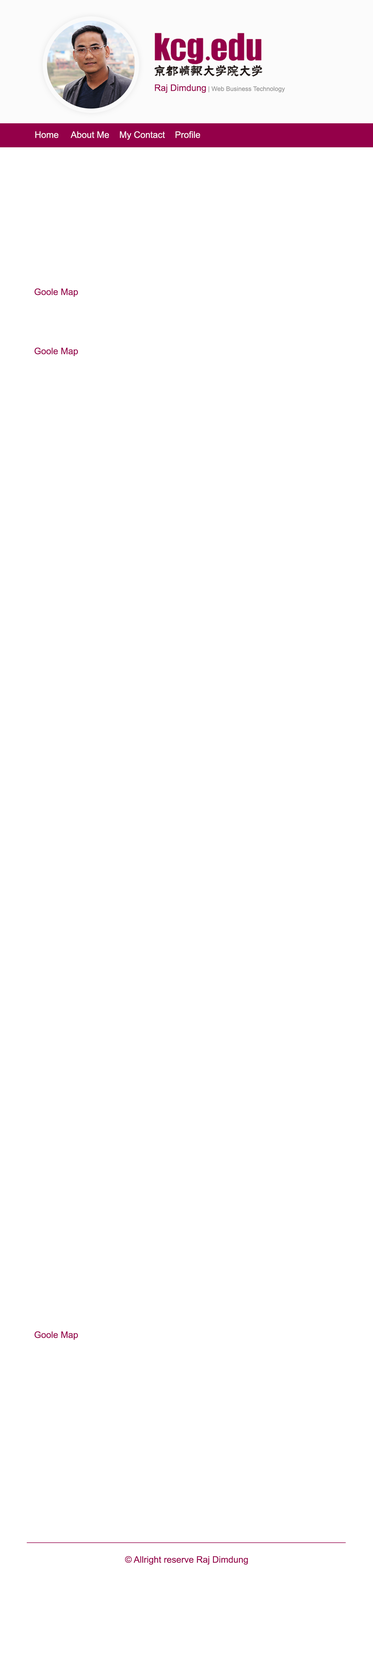
<style>
.page{position:relative;width:373px;height:1663px;background:#ffffff}
.page>*{position:absolute;margin:0}
.t1{font:6.3px "ArialMT";color:#929292}
.t2{font:9px "ArialMT";color:#940049}
.t3{font:9px "ArialMT";color:#ffffff}
</style>
<div class="page">
<p class="t1" style="left:155px;top:84px;width:130px;height:9px"><span class="t2">Raj Dimdung</span> | Web Business Technology</p>
<p class="t3" style="left:35px;top:131px;width:165px;height:9px">Home     About Me    My Contact    Profile</p>
<p class="t2" style="left:34px;top:288px;width:44px;height:9px">Goole Map</p>
<p class="t2" style="left:34px;top:347px;width:44px;height:9px">Goole Map</p>
<p class="t2" style="left:34px;top:1331px;width:44px;height:8px">Goole Map</p>
<p class="t2" style="left:125px;top:1556px;width:123px;height:8px">© Allright reserve Raj Dimdung</p>
</div>
